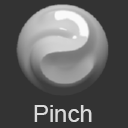
<style>
.page{position:relative;width:128px;height:128px;background:#333333}
.page>*{position:absolute;margin:0}
.t1{font:24px "ArialMT";color:#dadada}
</style>
<div class="page">
<p class="t1" style="left:34px;top:105px;width:58px;height:17px">Pinch</p>
</div>
